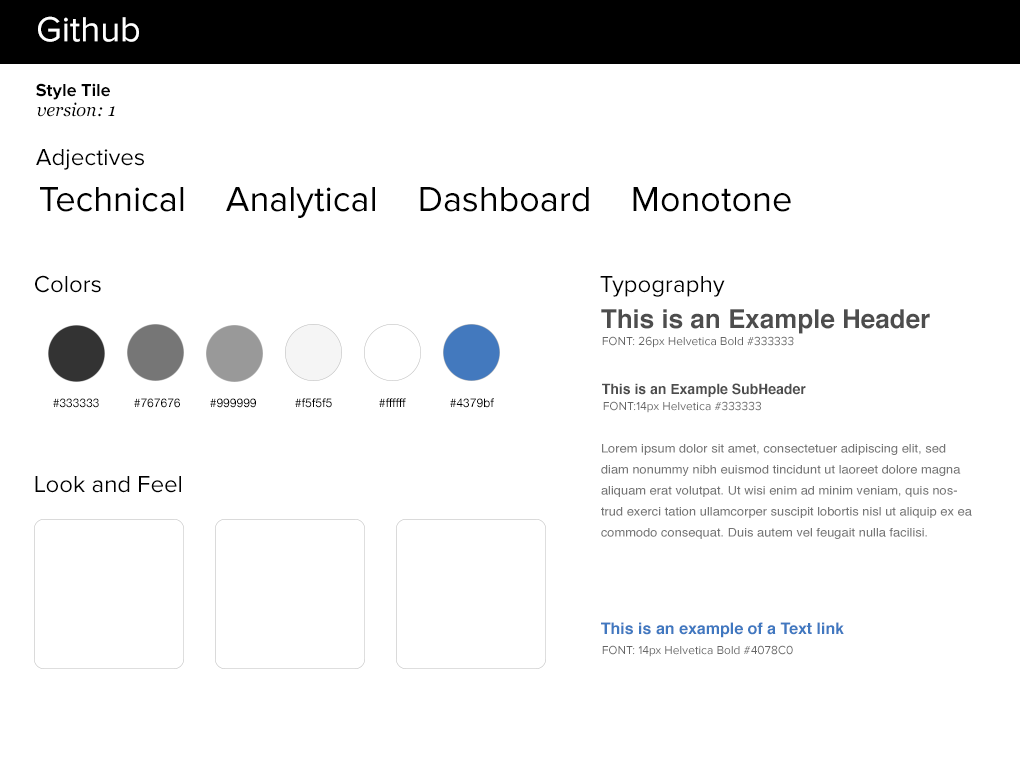
<style>
.page{position:relative;width:1020px;height:760px;background:#ffffff}
.page>*{position:absolute;margin:0}
.t1{font:36px "ProximaNova-Regular";color:#ffffff}
.t2{font:18px "ProximaNova-Bold";color:#000000}
.t3{font:18px "Georgia-Italic";color:#000000}
.t4{font:24px "ProximaNova-Regular";color:#000000}
.t5{font:36px "ProximaNova-Regular";color:#000000}
.t6{font:26px "Helvetica-Bold";color:#4d4d4d}
.t7{font:12px "ProximaNova-Regular";color:#666666}
.t8{font:14px "Helvetica-Bold";color:#4d4d4d}
.t9{font:12px "HelveticaNeue";color:#000000}
.t10{font:12px/21px "Helvetica";color:#767676;scale:1.07 1}
.t11{font:16px "Helvetica-Bold";color:#4078c0}
</style>
<div class="page">
<p class="t1" style="left:38px;top:16px;width:101px;height:26px">Github</p>
<p class="t2" style="left:36px;top:83px;width:74px;height:17px">Style Tile</p>
<p class="t3" style="left:37px;top:102px;width:78px;height:15px">version: 1</p>
<p class="t4" style="left:36px;top:149px;width:108px;height:21px">Adjectives</p>
<p class="t5" style="left:40px;top:187px;width:144px;height:25px">Technical</p>
<p class="t5" style="left:226px;top:187px;width:149px;height:31px">Analytical</p>
<p class="t5" style="left:420px;top:187px;width:169px;height:25px">Dashboard</p>
<p class="t5" style="left:633px;top:187px;width:158px;height:25px">Monotone</p>
<p class="t4" style="left:35px;top:275px;width:66px;height:18px">Colors</p>
<p class="t4" style="left:600px;top:276px;width:125px;height:21px">Typography</p>
<p class="t6" style="left:601px;top:309px;width:329px;height:25px">This is an Example Header</p>
<p class="t7" style="left:602px;top:336px;width:192px;height:12px">FONT: 26px Helvetica Bold #333333</p>
<p class="t8" style="left:602px;top:383px;width:204px;height:14px">This is an Example SubHeader</p>
<p class="t9" style="left:53px;top:398px;width:46px;height:10px">#333333</p>
<p class="t9" style="left:134px;top:398px;width:46px;height:10px">#767676</p>
<p class="t9" style="left:210px;top:398px;width:46px;height:10px">#999999</p>
<p class="t9" style="left:295px;top:398px;width:37px;height:10px">#f5f5f5</p>
<p class="t9" style="left:379px;top:398px;width:27px;height:9px">#ffffff</p>
<p class="t9" style="left:450px;top:398px;width:44px;height:10px">#4379bf</p>
<p class="t7" style="left:603px;top:401px;width:158px;height:12px">FONT:14px Helvetica #333333</p>
<p class="t10" style="left:601px;top:444px;width:371px;height:95px">Lorem ipsum dolor sit amet, consectetuer adipiscing elit, sed diam nonummy nibh euismod tincidunt ut laoreet dolore magna aliquam erat volutpat. Ut wisi enim ad minim veniam, quis nostrud exerci tation ullamcorper suscipit lobortis nisl ut aliquip ex ea commodo consequat. Duis autem vel feugait nulla facilisi.</p>
<p class="t4" style="left:35px;top:476px;width:146px;height:17px">Look and Feel</p>
<p class="t11" style="left:601px;top:622px;width:243px;height:16px">This is an example of a Text link</p>
<p class="t7" style="left:602px;top:645px;width:191px;height:12px">FONT: 14px Helvetica Bold #4078C0</p>
</div>
